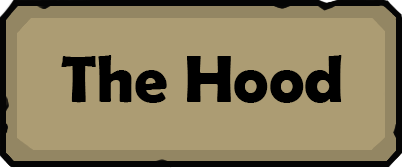
<style>
.page{position:relative;width:402px;height:168px;background:#ac9c73}
.page>*{position:absolute;margin:0}
.t1{font:66.7px "BerlinSansFBDemi-Bold";color:#000000}
</style>
<div class="page">
<p class="t1" style="left:61px;top:55px;width:281px;height:48px">The Hood</p>
</div>
